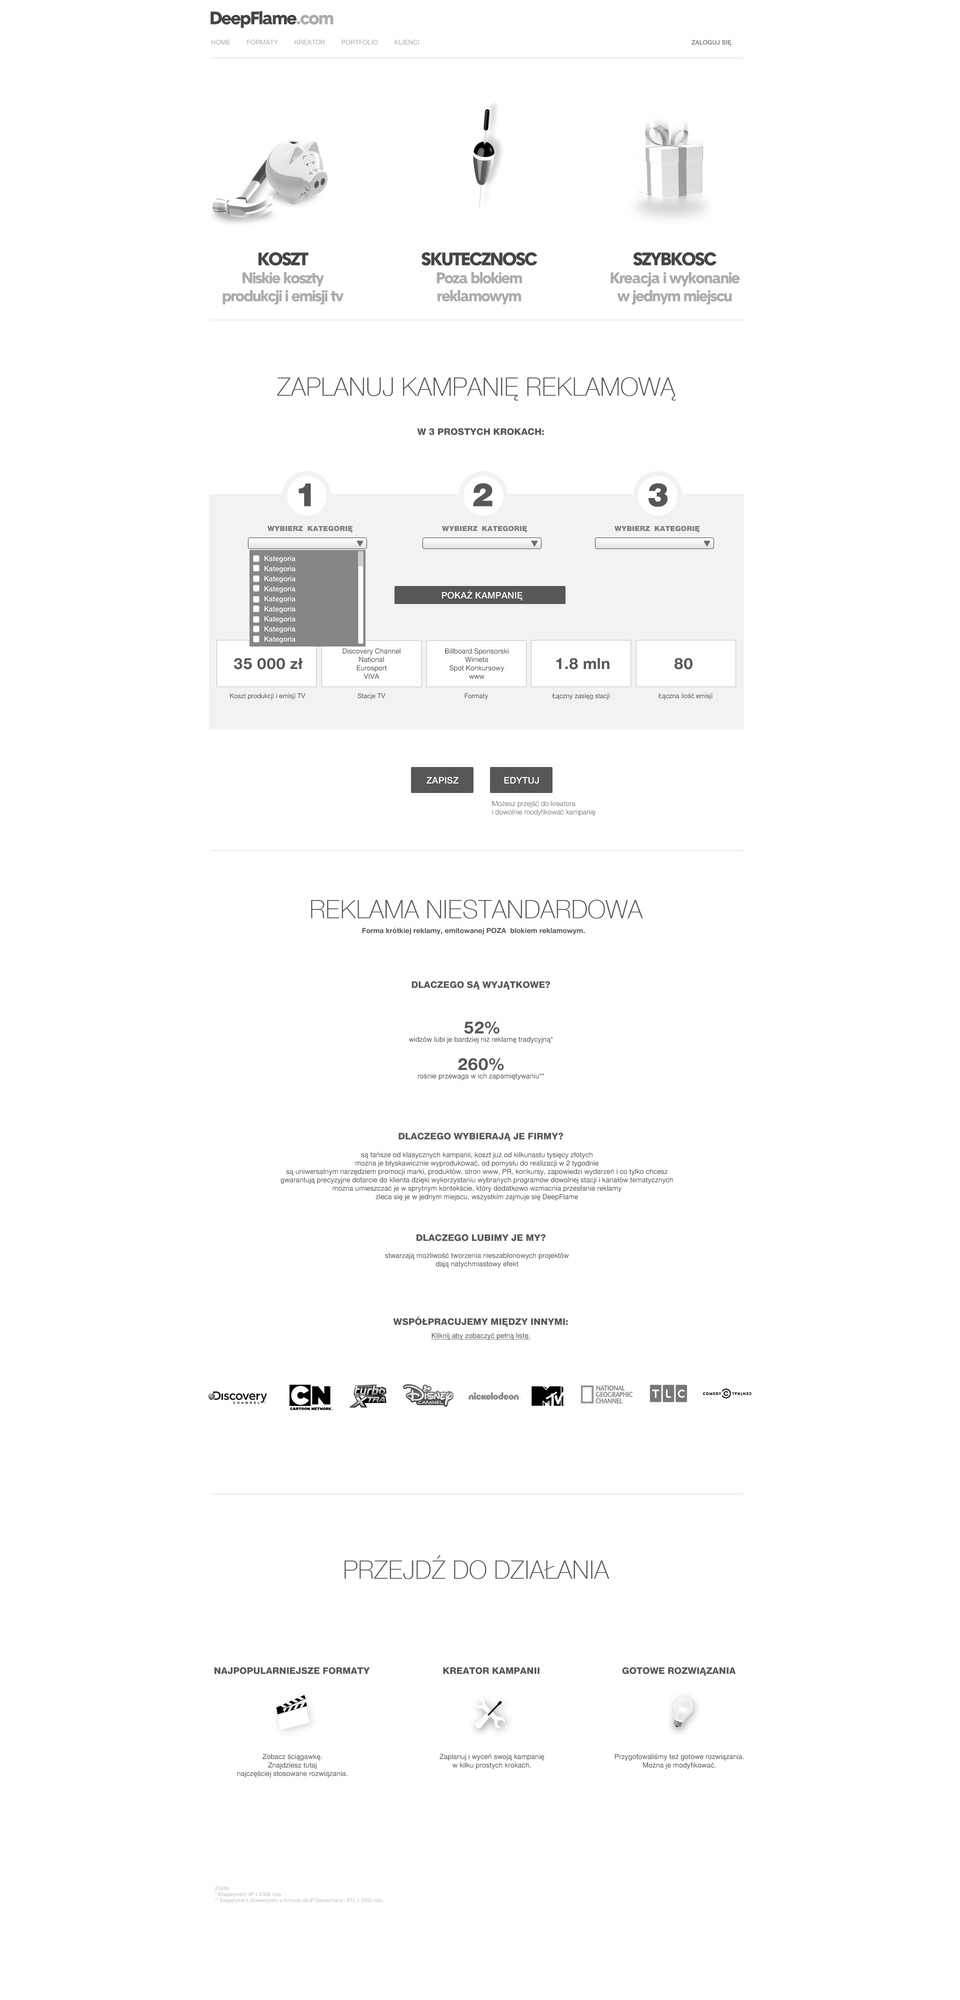
<style>
.page{position:relative;width:960px;height:2000px;background:#ffffff}
.page>*{position:absolute;margin:0}
.t1{font:17.5px "StraightTTEFNHeavy";letter-spacing:-0.075em;color:#454545}
.t2{font:17.5px "StraightTTEFNHeavy";letter-spacing:-0.075em;color:#acacac}
.t3{font:6.5px "SwitzerPSEFN";color:#acacac}
.t4{font:6px "SwitzerPSEFNMedium";color:#737373}
.t5{font:15px "StraightTTEFNHeavy";letter-spacing:-0.075em;color:#acacac}
.t6{font:25.3px "SwitzerCndTTEFNThin";color:#575757;scale:1.2 1}
.t7{font:9px "SwitzerPSEFNHeavy";color:#575757}
.t8{font:31.6px "SwitzerTTEFNBlack";color:#575757}
.t9{font:7px "SwitzerTTEFNBlack";color:#808080}
.t10{font:7px/10.1px "SwitzerPSEFNMedium";color:#ffffff}
.t11{font:9px "SwitzerPSEFNMedium";color:#ffffff}
.t12{font:7px "SwitzerTTEFN";color:#575757}
.t13{font:15.2px "SwitzerTTEFN-Bold";color:#575757}
.t14{font:6.5px "SwitzerTTEFN";color:#575757}
.t15{font:7px "SwitzerPSEFNLight";color:#575757}
.t16{font:7px "SwitzerTTEFN-Bold";color:#575757}
.t17{font:16.5px "SwitzerTTEFN-Bold";color:#575757}
.t18{font:7px "SwitzerTTEFN";color:#575757;text-decoration:underline}
.t19{font:5px "SwitzerTTEFNLight";color:#a3a2a2}
</style>
<div class="page">
<p class="t1" style="left:210px;top:11px;width:124px;height:17px">DeepFlame<span class="t2">.com</span></p>
<p class="t3" style="left:212px;top:40px;width:207px;height:5px">HOME         FORMATY         KREATOR         PORTFOLIO         KLIENCI</p>
<p class="t4" style="left:692px;top:40px;width:40px;height:6px">ZALOGUJ SIĘ</p>
<p class="t5" style="left:222px;top:252px;width:122px;height:53px;text-align:center"><span class="t1">KOSZT<br></span>Niskie koszty<br>produkcji i emisji tv</p>
<p class="t5" style="left:422px;top:252px;width:116px;height:52px;text-align:center"><span class="t1">SKUTECZNOSC<br></span>Poza blokiem<br>reklamowym</p>
<p class="t5" style="left:610px;top:252px;width:130px;height:53px;text-align:center"><span class="t1">SZYBKOSC<br></span>Kreacja i wykonanie<br>w jednym miejscu</p>
<p class="t6" style="left:277px;top:377px;width:399px;height:24px">ZAPLANUJ KAMPANIĘ REKLAMOWĄ</p>
<p class="t7" style="left:417px;top:428px;width:127px;height:7px">W 3 PROSTYCH KROKACH:</p>
<p class="t8" style="left:298px;top:484px;width:13px;height:22px">1</p>
<p class="t8" style="left:473px;top:483px;width:19px;height:23px">2</p>
<p class="t8" style="left:648px;top:483px;width:20px;height:24px">3</p>
<p class="t9" style="left:268px;top:526px;width:84px;height:6px">WYBIERZ  KATEGORIĘ</p>
<p class="t9" style="left:442px;top:526px;width:85px;height:6px">WYBIERZ  KATEGORIĘ</p>
<p class="t9" style="left:614px;top:526px;width:86px;height:6px">WYBIERZ  KATEGORIĘ</p>
<p class="t10" style="left:264px;top:556px;width:32px;height:87px;text-align:justify">Kategoria<br>Kategoria<br>Kategoria<br>Kategoria<br>Kategoria<br>Kategoria<br>Kategoria<br>Kategoria<br>Kategoria</p>
<p class="t11" style="left:442px;top:590px;width:80px;height:10px">POKAŻ KAMPANIĘ</p>
<p class="t12" style="left:342px;top:648px;width:58px;height:31px;text-align:center">Discovery Channel<br>National<br>Eurosport<br>VIVA</p>
<p class="t12" style="left:445px;top:648px;width:63px;height:31px;text-align:center">Billboard Sponsorski<br>Winieta<br>Spot Konkursowy<br>www</p>
<p class="t13" style="left:234px;top:658px;width:68px;height:12px">35 000 zł</p>
<p class="t13" style="left:556px;top:658px;width:54px;height:12px">1.8 mln</p>
<p class="t13" style="left:674px;top:658px;width:18px;height:12px">80</p>
<p class="t14" style="left:230px;top:693px;width:76px;height:7px">Koszt produkcji i emisji TV</p>
<p class="t14" style="left:358px;top:693px;width:28px;height:7px">Stacje TV</p>
<p class="t14" style="left:464px;top:693px;width:24px;height:7px">Formaty</p>
<p class="t14" style="left:552px;top:693px;width:58px;height:7px">Łączny zasięg stacji</p>
<p class="t14" style="left:658px;top:693px;width:54px;height:7px">Łączna ilość emisji</p>
<p class="t11" style="left:426px;top:776px;width:32px;height:8px">ZAPISZ</p>
<p class="t11" style="left:504px;top:777px;width:35px;height:7px">EDYTUJ</p>
<p class="t15" style="left:492px;top:800px;width:104px;height:16px">Możesz przejść do kreatora<br>i dowolnie modyfikować kampanię</p>
<p class="t6" style="left:311px;top:900px;width:332px;height:19px">REKLAMA NIESTANDARDOWA</p>
<p class="t16" style="left:362px;top:928px;width:223px;height:6px">Forma krótkiej reklamy, emitowanej POZA  blokiem reklamowym.</p>
<p class="t7" style="left:412px;top:981px;width:138px;height:9px">DLACZEGO SĄ WYJĄTKOWE?</p>
<p class="t12" style="left:408px;top:1022px;width:145px;height:58px;text-align:justify"><span class="t17">52%</span><br>widzów lubi je bardziej niż reklamę tradycyjną*<br><br><span class="t17">260%</span><br>rośnie przewaga w ich zapamiętywaniu**</p>
<p class="t7" style="left:398px;top:1132px;width:166px;height:10px">DLACZEGO WYBIERAJĄ JE FIRMY?</p>
<p class="t12" style="left:280px;top:1152px;width:393px;height:116px;text-align:justify">są tańsze od klasycznych kampanii, koszt już od kilkunastu tysięcy złotych<br>można je błyskawicznie wyprodukować, od pomysłu do realizacji w 2 tygodnie <br>są uniwersalnym narzędziem promocji marki, produktów, stron www, PR, konkursy, zapowiedzi wydarzeń i co tylko chcesz<br>gwarantują precyzyjne dotarcie do klienta dzięki wykorzystaniu wybranych programów dowolnej stacji i kanałów tematycznych<br>można umieszczać je w sprytnym kontekście, który dodatkowo wzmacnia przesłanie reklamy<br>zleca się je w jednym miejscu, wszystkim zajmuje się DeepFlame<br><br><br><br><br><br><br>stwarzają możliwość tworzenia nieszablonowych projektów<br>dają natychmiastowy efekt</p>
<p class="t7" style="left:416px;top:1234px;width:130px;height:7px">DLACZEGO LUBIMY JE MY?</p>
<p class="t7" style="left:393px;top:1316px;width:175px;height:11px">WSPÓŁPRACUJEMY MIĘDZY INNYMI:</p>
<p class="t18" style="left:431px;top:1332px;width:99px;height:8px">Kliknij aby zobaczyć pełną listę.</p>
<p class="t6" style="left:344px;top:1555px;width:266px;height:25px">PRZEJDŹ DO DZIAŁANIA</p>
<p class="t7" style="left:214px;top:1667px;width:156px;height:7px">NAJPOPULARNIEJSZE FORMATY</p>
<p class="t7" style="left:443px;top:1667px;width:97px;height:7px">KREATOR KAMPANII</p>
<p class="t7" style="left:622px;top:1667px;width:114px;height:9px">GOTOWE ROZWIĄZANIA</p>
<p class="t12" style="left:238px;top:1754px;width:110px;height:24px;text-align:center">Zobacz ściągawkę.<br>Znajdziesz tutaj<br>najczęściej stosowane rozwiązania.</p>
<p class="t12" style="left:440px;top:1754px;width:104px;height:15px;text-align:center">Zaplanuj i wyceń swoją kampanię<br>w kilku prostych krokach.</p>
<p class="t12" style="left:615px;top:1754px;width:129px;height:15px;text-align:center">Przygotowaliśmy też gotowe rozwiązania.<br>Można je modyfikować.</p>
<p class="t19" style="left:215px;top:1885px;width:168px;height:18px">Źródło: <br>* Eksperyment 4P z 2006 roku <br>** Eksperyment Uniwersytetu w Erfurcie dla IP Deutschland i RTL z 2002 roku</p>
</div>
